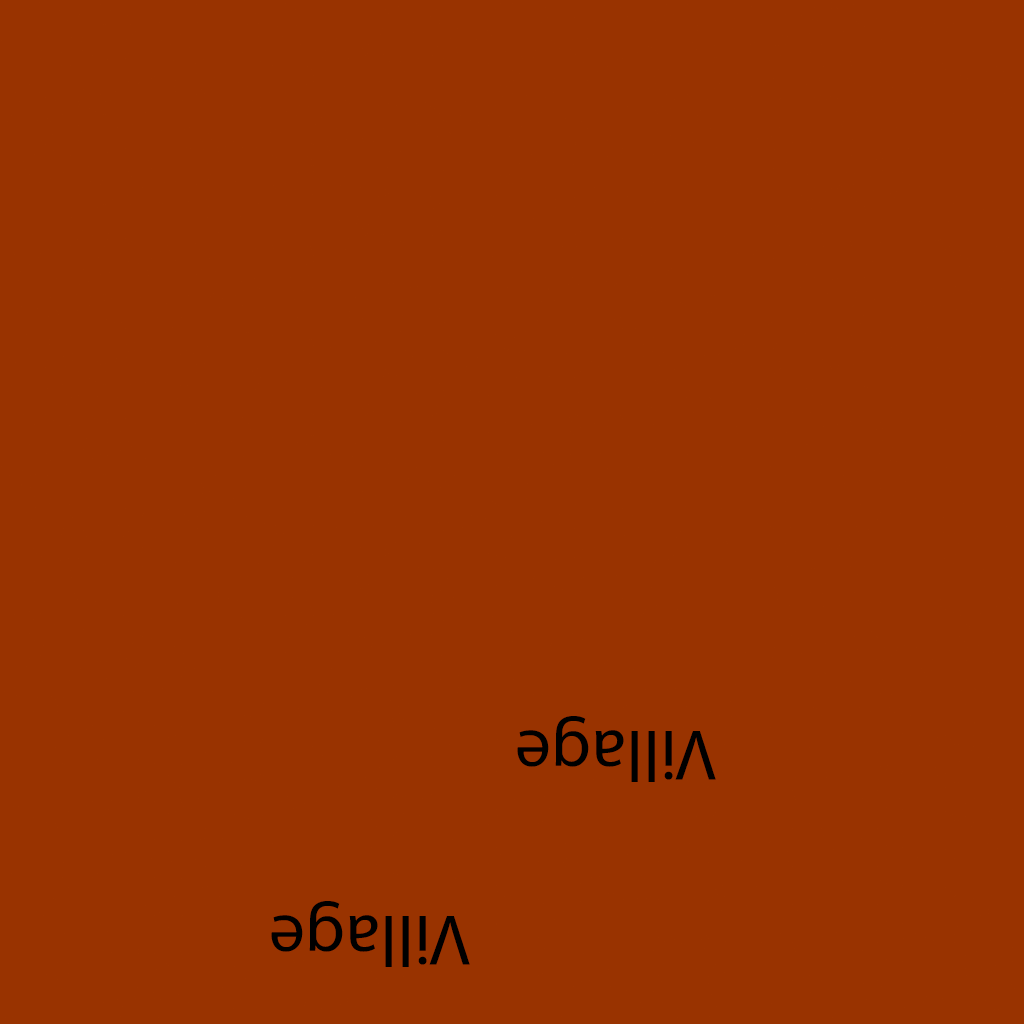
<style>
.page{position:relative;width:1024px;height:1024px;background:#993300}
.page>*{position:absolute;margin:0}
.t1{font:72px "MyriadPro-Regular";color:#000000}
</style>
<div class="page">
<p class="t1" style="left:517px;top:716px;width:199px;height:66px;rotate:-180deg">Village</p>
<p class="t1" style="left:271px;top:901px;width:199px;height:66px;rotate:-180deg">Village</p>
</div>
